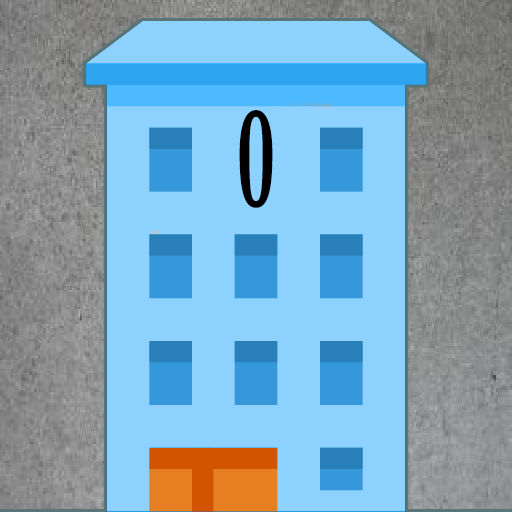
<style>
.page{position:relative;width:512px;height:512px;background:#8dd2ff}
.page>*{position:absolute;margin:0}
.t1{font:130px "BirchStd";color:#000000}
</style>
<div class="page">
<p class="t1" style="left:239px;top:110px;width:34px;height:98px">0</p>
</div>
